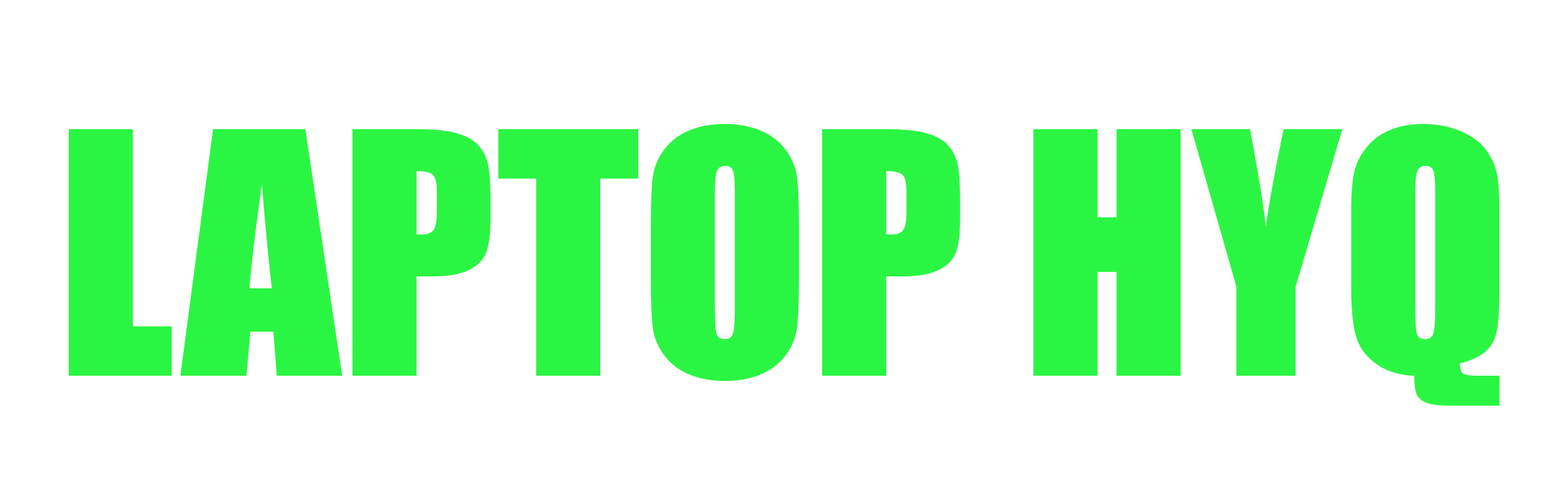
<style>
.page{position:relative;width:1568px;height:490px;background:#ffffff}
.page>*{position:absolute;margin:0}
.t1{font:311.1px "Impact";color:#2bf543}
</style>
<div class="page">
<p class="t1" style="left:69px;top:124px;width:1431px;height:281px">LAPTOP HYQ</p>
</div>
